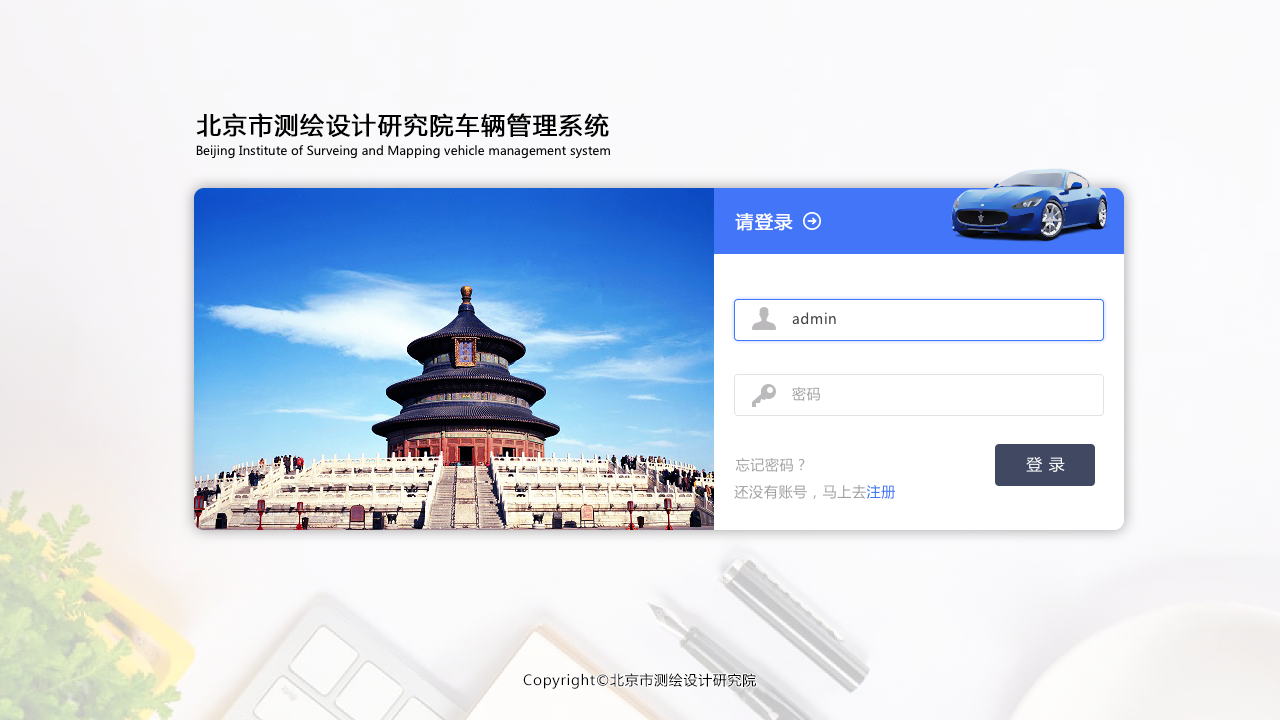
<style>
.page{position:relative;width:1280px;height:720px}
.page>*{position:absolute;margin:0}
.t1{font:24px "MicrosoftYaHei";letter-spacing:0.05em;color:#000000;font-weight:bold}
.t2{font:12.3px "MicrosoftYaHei";color:#000000}
.t3{font:18px "MicrosoftYaHei";letter-spacing:0.05em;color:#ffffff;font-weight:bold}
.t4{font:14px "MicrosoftYaHei";letter-spacing:0.05em;color:#444444}
.t5{font:14px "MicrosoftYaHei";letter-spacing:0.05em;color:#a2a2a2}
.t6{font:16px "MicrosoftYaHei";letter-spacing:0.05em;color:#ffffff}
.t7{font:14px "MicrosoftYaHei";letter-spacing:0.05em;color:#4275f8}
.t8{font:14px "MicrosoftYaHei";letter-spacing:0.05em;color:#000000}
</style>
<div class="page">
<p class="t1" style="left:196px;top:113px;width:413px;height:25px">北京市测绘设计研究院车辆管理系统</p>
<p class="t2" style="left:196px;top:145px;width:414px;height:14px">Beijing Institute of Surveing and Mapping vehicle management system</p>
<p class="t3" style="left:735px;top:213px;width:58px;height:18px">请登录</p>
<p class="t4" style="left:792px;top:312px;width:44px;height:13px">admin</p>
<p class="t5" style="left:792px;top:387px;width:28px;height:14px">密码</p>
<p class="t5" style="left:736px;top:458px;width:69px;height:14px">忘记密码？</p>
<p class="t6" style="left:1026px;top:457px;width:39px;height:15px">登 录</p>
<p class="t5" style="left:734px;top:485px;width:162px;height:14px">还没有账号，马上去<span class="t7">注册</span></p>
<p class="t8" style="left:523px;top:673px;width:233px;height:16px">Copyright©北京市测绘设计研究院</p>
</div>
